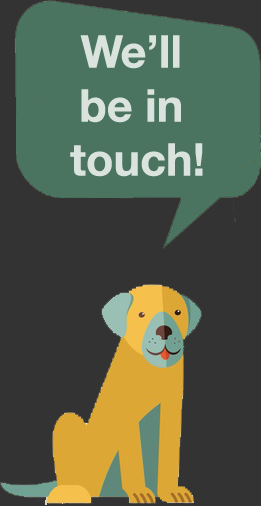
<style>
.page{position:relative;width:261px;height:506px;background:#333333}
.page>*{position:absolute;margin:0}
.t1{font:45px "HelveticaNeue-Bold";color:#dbe3df}
</style>
<div class="page">
<p class="t1" style="left:70px;top:35px;width:133px;height:142px;text-align:center">We’ll <br>be in<br> touch!</p>
</div>
